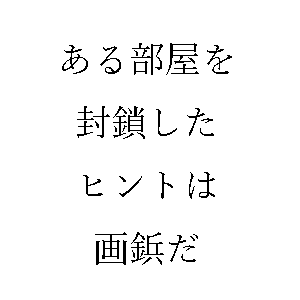
<style>
.page{position:relative;width:300px;height:300px;background:#ffffff}
.page>*{position:absolute;margin:0}
.t1{font:36px "YuMincho-Regular";color:#000000}
</style>
<div class="page">
<p class="t1" style="left:62px;top:43px;width:170px;height:222px;text-align:center">ある部屋を<br>封鎖した<br>ヒントは<br>画鋲だ</p>
</div>
